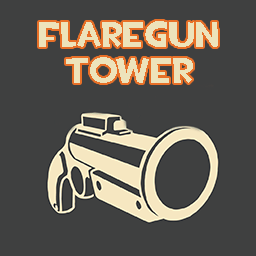
<style>
.page{position:relative;width:256px;height:256px;background:#3f4040}
.page>*{position:absolute;margin:0}
.t1{font:36px/36px "TF2Build";color:#ede3bb}
</style>
<div class="page">
<p class="t1" style="left:39px;top:21px;width:179px;height:62px;text-align:center">FlareGUN<br>Tower</p>
</div>
